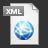
<style>
.page{position:relative;width:48px;height:48px;background:#333333}
.page>*{position:absolute;margin:0}
.t1{font:7px "HelveticaNeue-Bold";letter-spacing:0.02em;color:#f4f4f4}
</style>
<div class="page">
<p class="t1" style="left:6px;top:9px;width:16px;height:5px">XML</p>
</div>
